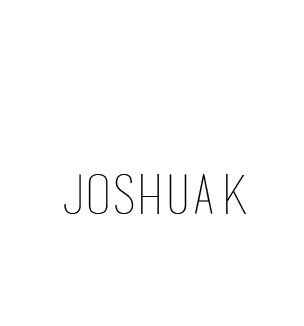
<style>
.page{position:relative;width:304px;height:326px;background:#ffffff}
.page>*{position:absolute;margin:0}
.t1{font:54.1px "basictitlefont";color:#000000}
</style>
<div class="page">
<p class="t1" style="left:64px;top:174px;width:182px;height:40px">joshuA k</p>
</div>
